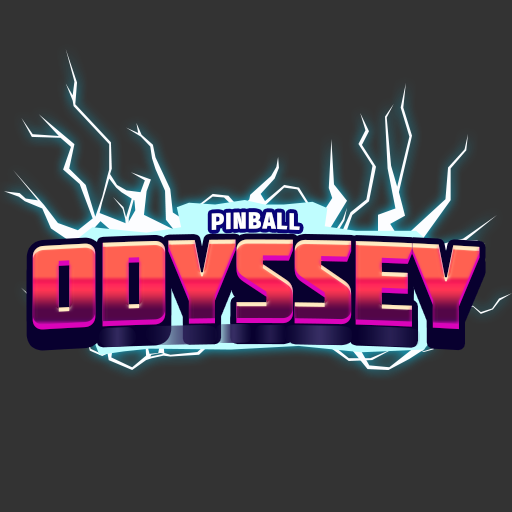
<style>
.page{position:relative;width:512px;height:512px;background:#333333}
.page>*{position:absolute;margin:0}
.t1{font:22.7px "FiraSans-Heavy";letter-spacing:0.05em;color:#ffffff;scale:0.96 1}
.t2{font:119px "Molot";letter-spacing:-0.025em}
</style>
<div class="page">
<p class="t1" style="left:211px;top:212px;width:89px;height:18px">PINBALL</p>
<p class="t2" style="left:32px;top:239px;width:448px;height:91px">ODYSSEY</p>
</div>
